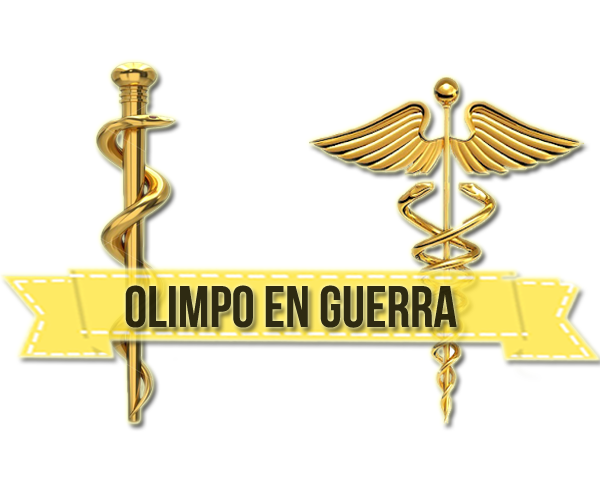
<style>
.page{position:relative;width:600px;height:500px;background:#ffffff}
.page>*{position:absolute;margin:0}
.t1{font:58.3px "BebasNeue";color:#2e2a12}
</style>
<div class="page">
<p class="t1" style="left:125px;top:285px;width:332px;height:43px">Olimpo en Guerra</p>
</div>
